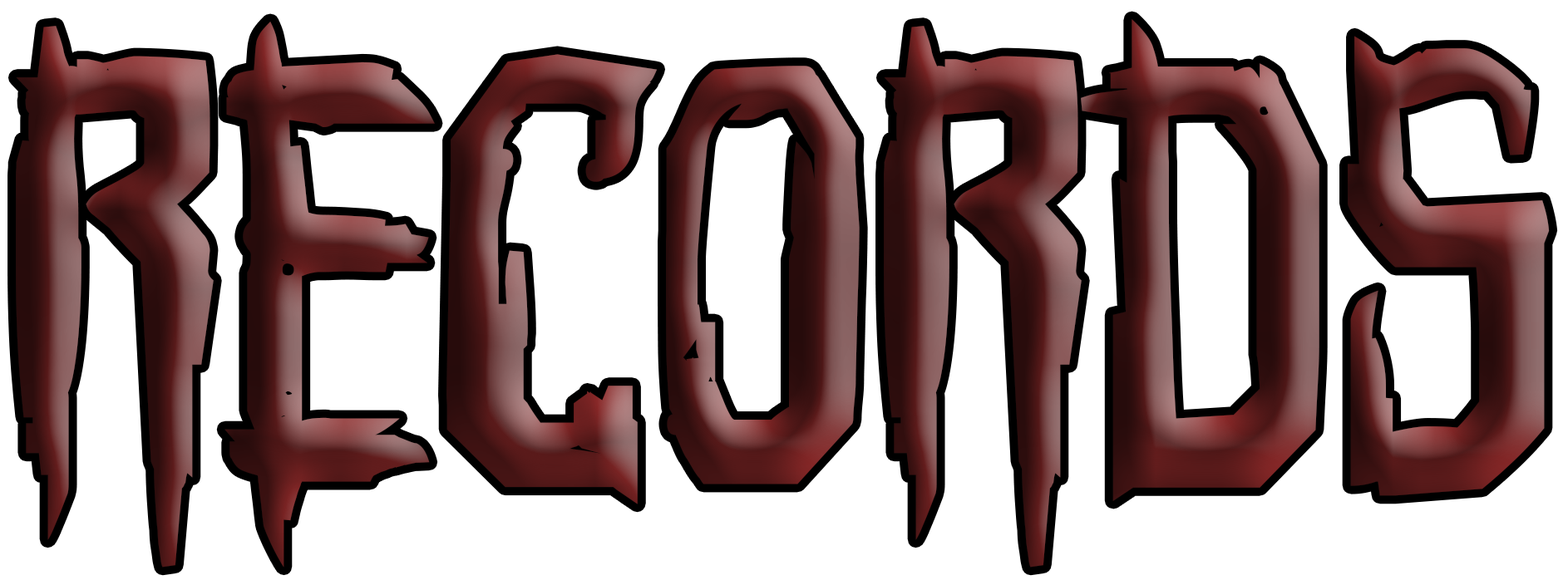
<style>
.page{position:relative;width:1568px;height:585px;background:#ffffff}
.page>*{position:absolute;margin:0}
.t1{font:606.1px "HorroroidBold"}
</style>
<div class="page">
<p class="t1" style="left:16px;top:19px;width:1534px;height:549px">RECORDS</p>
</div>
